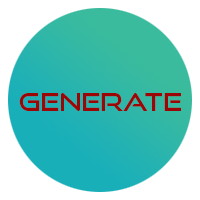
<style>
.page{position:relative;width:200px;height:200px;background:#ffffff}
.page>*{position:absolute;margin:0}
.t1{font:25px "GoodTimesRg-Regular";color:#9b0707}
</style>
<div class="page">
<p class="t1" style="left:19px;top:93px;width:162px;height:18px">Generate</p>
</div>
